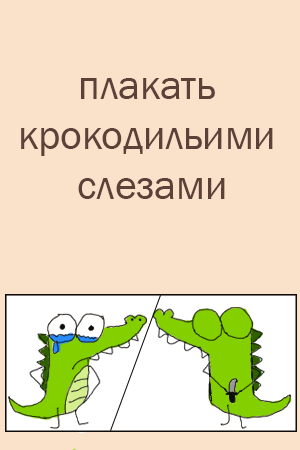
<style>
.page{position:relative;width:300px;height:450px;background:#f9e1ca}
.page>*{position:absolute;margin:0}
.t1{font:41.7px "FranklinGothic-Book";color:#5d4037}
</style>
<div class="page">
<p class="t1" style="left:21px;top:78px;width:252px;height:121px;text-align:center">плакать <br>крокодильими <br>слезами</p>
</div>
